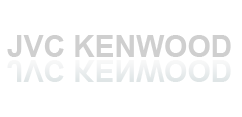
<style>
.page{position:relative;width:242px;height:117px;background:#ffffff}
.page>*{position:absolute;margin:0}
.t1{font:29.8px "Arial-BoldMT";color:#cfcfcf}
.t2{font:29.8px "Arial-BoldMT";color:#eceff0}
</style>
<div class="page">
<p class="t1" style="left:7px;top:35px;width:224px;height:22px">JVC KENWOOD</p>
<p class="t2" style="left:7px;top:60px;width:224px;height:22px">JVC KENWOOD</p>
</div>
